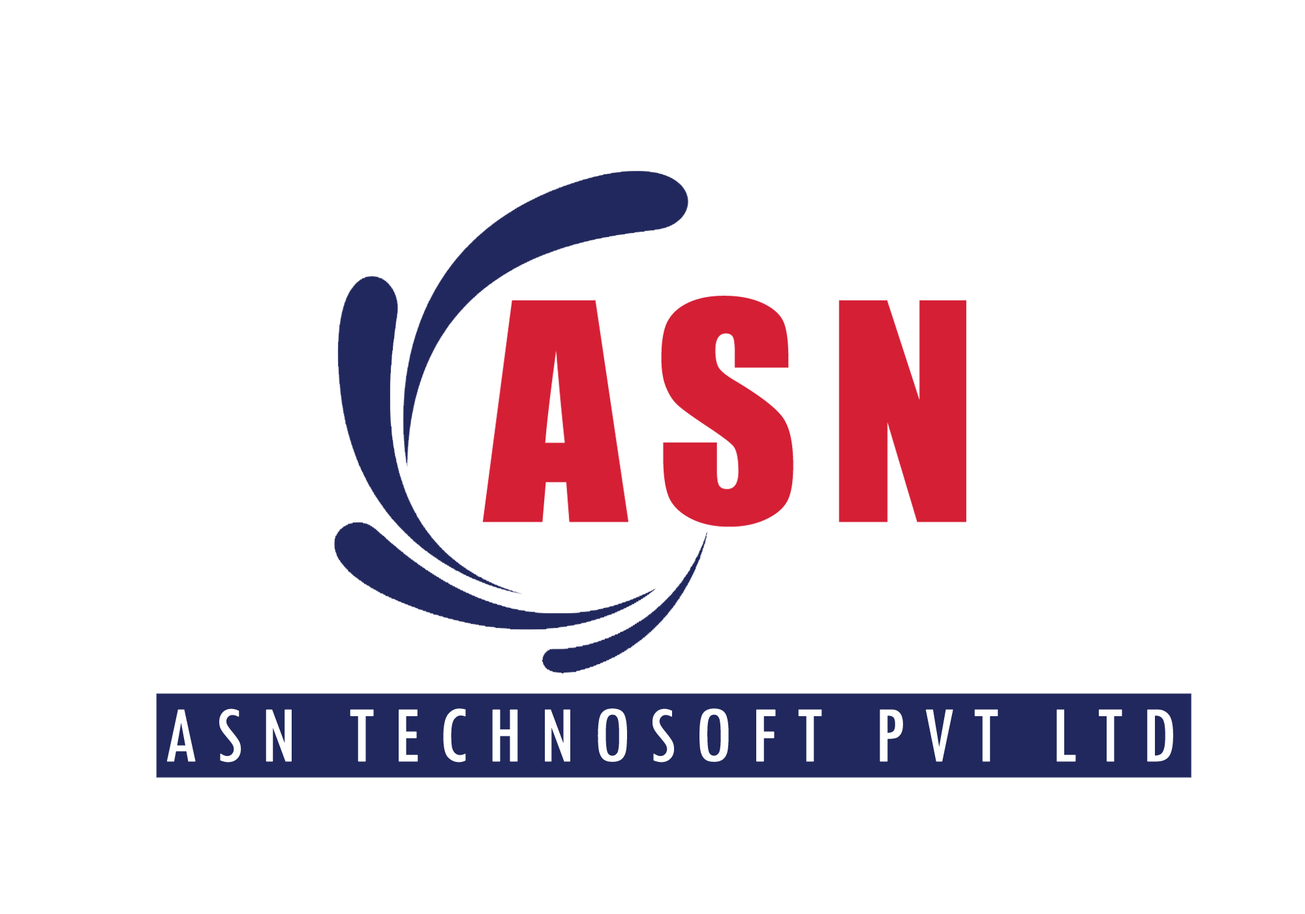
<style>
.page{position:relative;width:1305px;height:914px;background:#ffffff}
.page>*{position:absolute;margin:0}
.t1{font:82.2px "TwCenMT-Condensed";letter-spacing:0.2em;color:#ffffff;text-transform:uppercase;font-weight:bold}
</style>
<div class="page">
<p class="t1" style="left:167px;top:708px;width:1006px;height:54px">asn technosoft pvt ltd</p>
</div>
